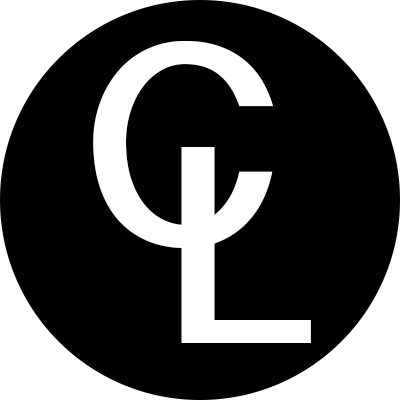
<style>
.page{position:relative;width:400px;height:400px;background:#000000}
.page>*{position:absolute;margin:0}
.t1{font:280px "DevanagariSangamMN-Bold";color:#ffffff}
</style>
<div class="page">
<p class="t1" style="left:93px;top:41px;width:180px;height:207px">C</p>
<p class="t1" style="left:181px;top:147px;width:130px;height:196px">L</p>
</div>
